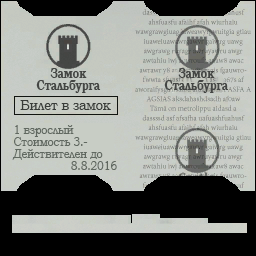
<style>
.page{position:relative;width:256px;height:256px;background:#000000}
.page>*{position:absolute;margin:0}
.t1{font:14px/12px "BookmanOldStyle-Bold";letter-spacing:-0.06em;color:#444644;scale:0.81 1}
.t2{font:15px "BookmanOldStyle";color:#383c38;scale:0.84 1}
.t3{font:13px/12px "BookmanOldStyle";color:#606860;scale:0.81 1}
</style>
<div class="page">
<p class="t1" style="left:36px;top:68px;width:65px;height:25px;text-align:center">Замок<br>Стальбурга</p>
<p class="t1" style="left:164px;top:68px;width:65px;height:25px;text-align:center">Замок<br>Стальбурга</p>
<p class="t2" style="left:20px;top:100px;width:91px;height:10px">Билет в замок</p>
<p class="t3" style="left:12px;top:125px;width:105px;height:45px">1 взрослый<br>Стоимость 3.-<br>Действителен до<br>                 8.8.2016</p>
</div>
